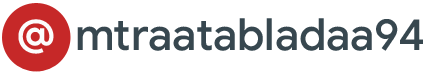
<style>
.page{position:relative;width:427px;height:75px;background:#ffffff}
.page>*{position:absolute;margin:0}
.t1{font:44.5px "GoogleSans-Bold";color:#fcfcfc}
.t2{font:44.4px "GoogleSans-Medium";color:#37474f}
</style>
<div class="page">
<p class="t1" style="left:18px;top:19px;width:36px;height:35px">@</p>
<p class="t2" style="left:77px;top:18px;width:346px;height:33px">mtraatabladaa94</p>
</div>
